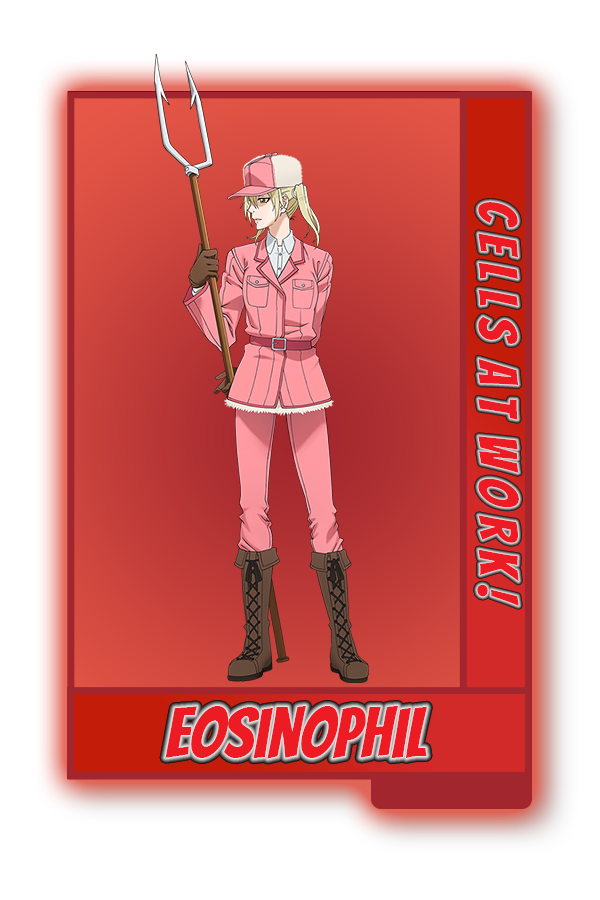
<style>
.page{position:relative;width:600px;height:900px;background:#ffffff}
.page>*{position:absolute;margin:0}
.t1{font:54px "Bangers-Regular";color:#ed1c24}
.t2{font:70px "Bangers-Regular";color:#ed1c24}
</style>
<div class="page">
<p class="t1" style="left:477px;top:202px;width:42px;height:404px;rotate:90deg">C e l l S  A t  W o r k !</p>
<p class="t2" style="left:165px;top:706px;width:262px;height:53px">Eosinophil</p>
</div>
